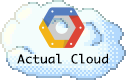
<style>
.page{position:relative;width:126px;height:80px;background:#f3fdfc}
.page>*{position:absolute;margin:0}
.t1{font:12px "Monaco";color:#000000;scale:1.06 1}
</style>
<div class="page">
<p class="t1" style="left:17px;top:53px;width:91px;height:11px">Actual Cloud</p>
</div>
